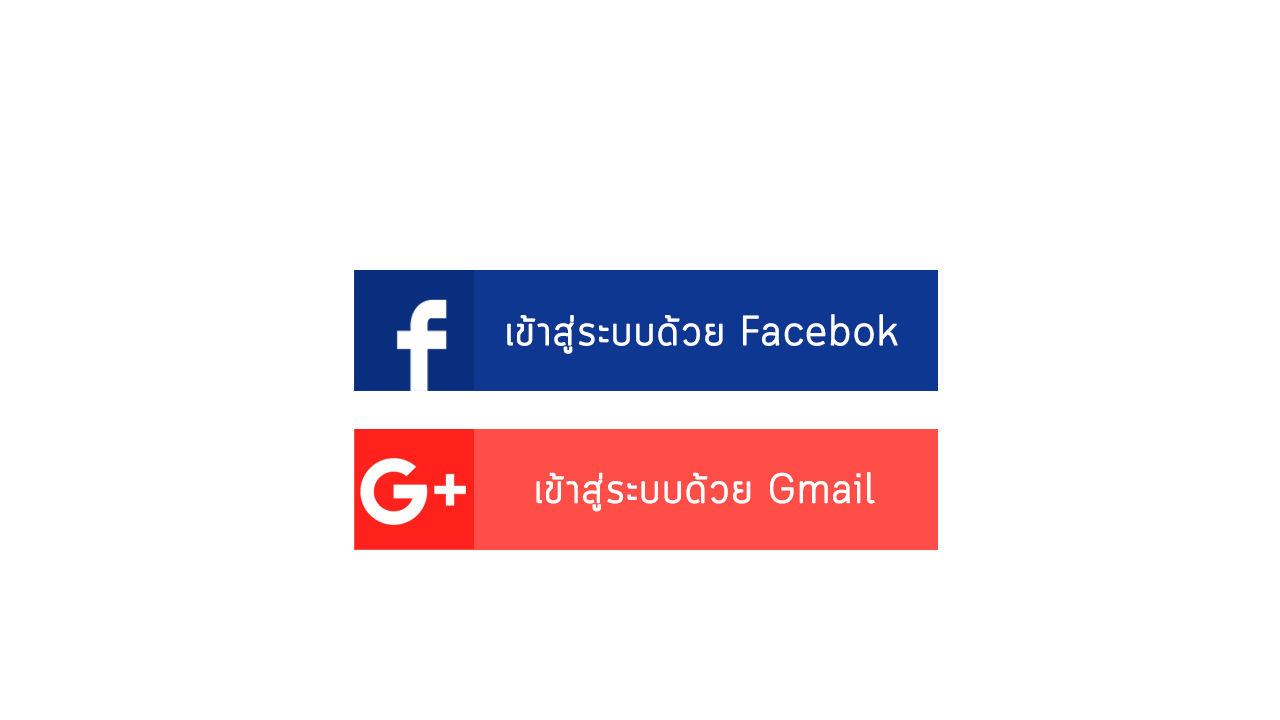
<style>
.page{position:relative;width:1280px;height:720px;background:#ffffff}
.page>*{position:absolute;margin:0}
.t1{font:41px "Cloud-Light";color:#fefefe;font-weight:bold}
</style>
<div class="page">
<p class="t1" style="left:507px;top:314px;width:391px;height:40px">เข้าสู่ระบบด้วย Facebok</p>
<p class="t1" style="left:536px;top:472px;width:339px;height:40px">เข้าสู่ระบบด้วย Gmail</p>
</div>
